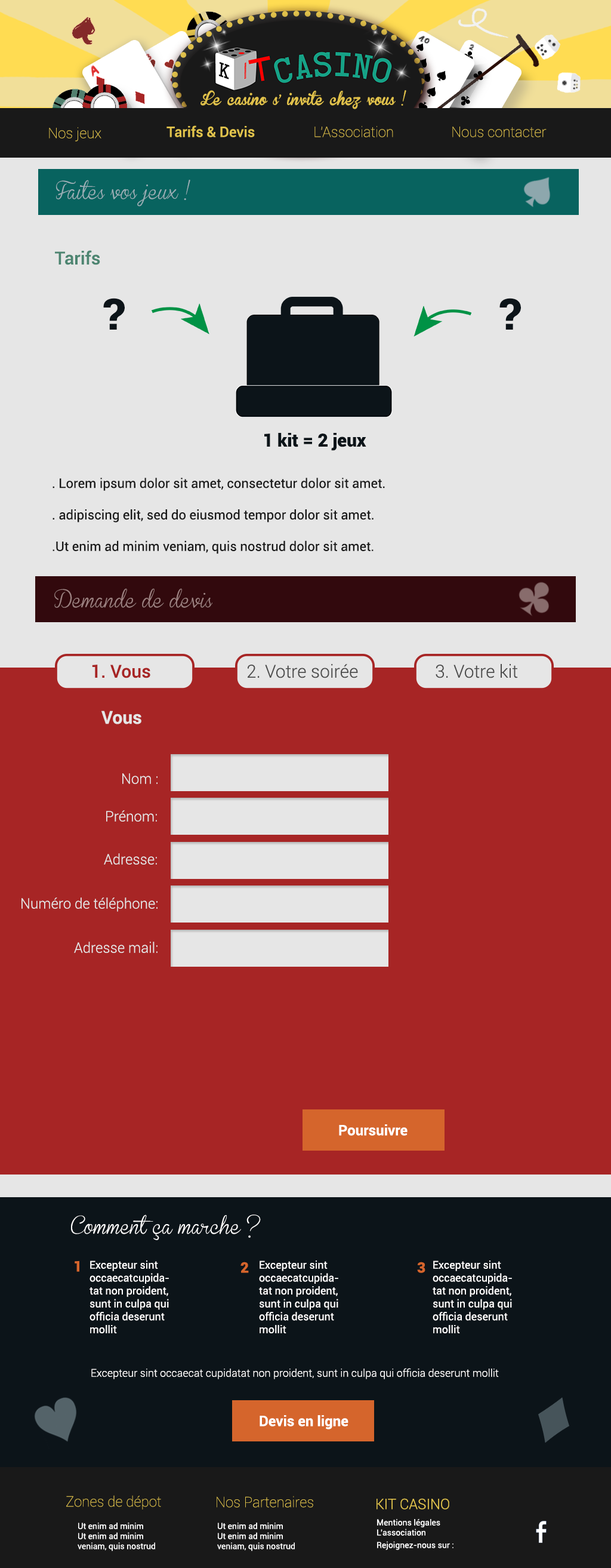
<style>
.page{position:relative;width:611px;height:1568px;background:#e6e6e6}
.page>*{position:absolute;margin:0}
.t1{font:13.1px "BrannbollFet";color:#e0c14b}
.t2{font:14.3px "Roboto-Medium";color:#e1c34c}
.t3{font:14.3px "Roboto-Thin";color:#e1c34c}
.t4{font:17.9px "BrannbollSmal";color:#99afb6}
.t5{font:17.9px "Roboto-Medium";color:#4d8571}
.t6{font:43px "Roboto-Black";color:#0c1419}
.t7{font:17.9px "Roboto-Black";color:#0c1419}
.t8{font:13.1px "Roboto-Regular";color:#191919}
.t9{font:17.9px "BrannbollSmal";color:#9e8181}
.t10{font:17.9px "Roboto-Medium";color:#a72525}
.t11{font:17.9px "Roboto-Light";color:#4c4c4c}
.t12{font:17.9px "Roboto-Bold";color:#e6e6e6}
.t13{font:14.3px "Roboto-Light";color:#e6e6e6}
.t14{font:14.3px "Roboto-Bold";color:#ffffff}
.t15{font:17.9px "BrannbollSmal";color:#ffffff}
.t16{font:14.3px "Roboto-Black";color:#d5652c}
.t17{font:10.7px "Roboto-Regular";color:#fffefe}
.t18{font:10.7px "Roboto-Light";color:#fffefe}
.t19{font:14.3px "Roboto-Light";color:#e1c34c}
.t20{font:8.4px "Roboto-Regular";color:#ffffff}
.t21{font:8.4px/12.5px "Roboto-Regular";color:#ffffff}
</style>
<div class="page">
<p class="t1" style="left:201px;top:90px;width:206px;height:19px">Le casino s' invite chez vous !</p>
<p class="t2" style="left:167px;top:125px;width:88px;height:12px">Tarifs &amp; Devis</p>
<p class="t3" style="left:315px;top:126px;width:78px;height:11px">L'Association</p>
<p class="t3" style="left:49px;top:127px;width:53px;height:15px">Nos jeux</p>
<p class="t3" style="left:453px;top:127px;width:94px;height:10px">Nous contacter</p>
<p class="t4" style="left:56px;top:180px;width:134px;height:27px">Faites vos jeux !</p>
<p class="t5" style="left:55px;top:250px;width:45px;height:15px">Tarifs</p>
<p class="t6" style="left:103px;top:298px;width:22px;height:32px">?</p>
<p class="t6" style="left:500px;top:298px;width:21px;height:32px">?</p>
<p class="t7" style="left:265px;top:433px;width:102px;height:18px">1 kit = 2 jeux</p>
<p class="t8" style="left:53px;top:478px;width:332px;height:76px">. Lorem ipsum dolor sit amet, consectetur dolor sit amet.<br><br>. adipiscing elit, sed do eiusmod tempor dolor sit amet.<br><br>.Ut enim ad minim veniam, quis nostrud dolor sit amet.</p>
<p class="t9" style="left:54px;top:588px;width:159px;height:20px">Demande de devis</p>
<p class="t10" style="left:92px;top:665px;width:58px;height:13px">1. Vous</p>
<p class="t11" style="left:248px;top:664px;width:110px;height:14px">2. Votre soirée</p>
<p class="t11" style="left:436px;top:664px;width:82px;height:14px">3. Votre kit</p>
<p class="t12" style="left:102px;top:711px;width:40px;height:13px">Vous</p>
<p class="t13" style="left:122px;top:773px;width:36px;height:11px">Nom :</p>
<p class="t13" style="left:106px;top:810px;width:51px;height:12px">Prénom:</p>
<p class="t13" style="left:104px;top:853px;width:53px;height:12px">Adresse:</p>
<p class="t13" style="left:21px;top:897px;width:137px;height:15px">Numéro de téléphone:</p>
<p class="t13" style="left:74px;top:942px;width:84px;height:11px">Adresse mail:</p>
<p class="t14" style="left:339px;top:1124px;width:69px;height:12px">Poursuivre</p>
<p class="t15" style="left:71px;top:1215px;width:190px;height:25px">Comment ça marche ?</p>
<p class="t16" style="left:75px;top:1260px;width:4px;height:12px">1</p>
<p class="t17" style="left:90px;top:1260px;width:79px;height:73px">Excepteur sint occaecat cupidatat non proident, sunt in culpa qui officia deserunt mollit</p>
<p class="t16" style="left:241px;top:1262px;width:8px;height:11px">2</p>
<p class="t17" style="left:259px;top:1260px;width:80px;height:73px">Excepteur sint occaecat cupidatat non proident, sunt in culpa qui officia deserunt mollit</p>
<p class="t16" style="left:417px;top:1262px;width:9px;height:11px">3</p>
<p class="t17" style="left:433px;top:1260px;width:79px;height:73px">Excepteur sint occaecat cupidatat non proident, sunt in culpa qui officia deserunt mollit</p>
<p class="t18" style="left:91px;top:1368px;width:408px;height:11px">Excepteur sint occaecat cupidatat non proident, sunt in culpa qui officia deserunt mollit</p>
<p class="t14" style="left:260px;top:1415px;width:89px;height:14px">Devis en ligne</p>
<p class="t3" style="left:66px;top:1495px;width:95px;height:14px">Zones de dépot</p>
<p class="t3" style="left:217px;top:1496px;width:96px;height:12px">Nos Partenaires</p>
<p class="t19" style="left:377px;top:1498px;width:73px;height:11px">KIT CASINO</p>
<p class="t20" style="left:78px;top:1523px;width:77px;height:28px">Ut enim ad minim <br>Ut enim ad minim <br>veniam, quis nostrud</p>
<p class="t20" style="left:217px;top:1523px;width:78px;height:28px">Ut enim ad minim <br>Ut enim ad minim <br>veniam, quis nostrud</p>
<p class="t20" style="left:377px;top:1519px;width:77px;height:31px">Mentions légales<br>L’association<br><span class="t21">Rejoignez-nous sur :</span></p>
</div>
